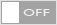
<style>
.page{position:relative;width:57px;height:25px;background:#a3a3a3}
.page>*{position:absolute;margin:0}
.t1{font:9.8px "FuturaBT-Medium";color:#ededed;scale:1.43 1}
</style>
<div class="page">
<p class="t1" style="left:23px;top:9px;width:27px;height:7px">OFF</p>
</div>
